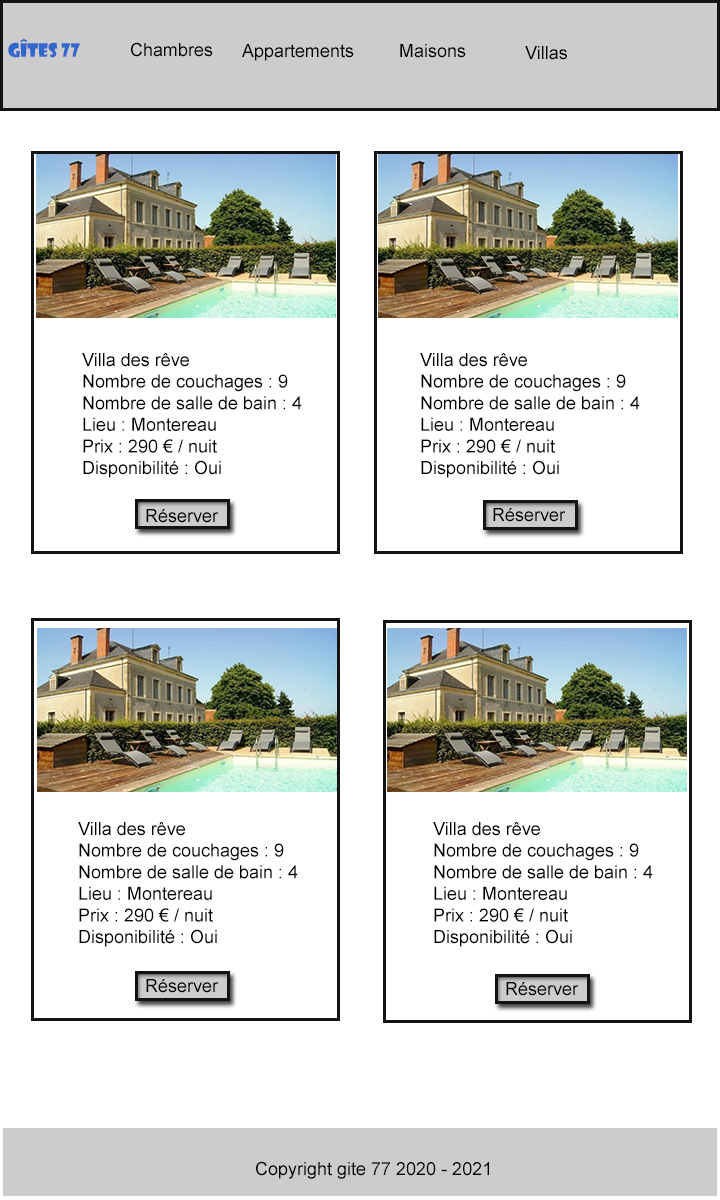
<style>
.page{position:relative;width:720px;height:1200px;background:#ffffff}
.page>*{position:absolute;margin:0}
.t1{font:18px "ShowcardGothic-Reg";color:#3366cc}
.t2{font:18px "ArialMT";color:#000000}
</style>
<div class="page">
<p class="t1" style="left:8px;top:38px;width:72px;height:20px">Gîtes 77</p>
<p class="t2" style="left:131px;top:42px;width:82px;height:15px">Chambres</p>
<p class="t2" style="left:242px;top:44px;width:112px;height:17px">Appartements</p>
<p class="t2" style="left:400px;top:44px;width:66px;height:14px">Maisons</p>
<p class="t2" style="left:525px;top:46px;width:42px;height:14px">Villas</p>
<p class="t2" style="left:82px;top:353px;width:220px;height:125px">Villa des rêve<br>Nombre de couchages : 9<br>Nombre de salle de bain : 4<br>Lieu : Montereau<br>Prix : 290 € / nuit<br>Disponibilité : Oui</p>
<p class="t2" style="left:420px;top:353px;width:220px;height:125px">Villa des rêve<br>Nombre de couchages : 9<br>Nombre de salle de bain : 4<br>Lieu : Montereau<br>Prix : 290 € / nuit<br>Disponibilité : Oui</p>
<p class="t2" style="left:146px;top:509px;width:73px;height:14px">Réserver</p>
<p class="t2" style="left:493px;top:508px;width:73px;height:14px">Réserver</p>
<p class="t2" style="left:78px;top:822px;width:220px;height:125px">Villa des rêve<br>Nombre de couchages : 9<br>Nombre de salle de bain : 4<br>Lieu : Montereau<br>Prix : 290 € / nuit<br>Disponibilité : Oui</p>
<p class="t2" style="left:433px;top:822px;width:220px;height:125px">Villa des rêve<br>Nombre de couchages : 9<br>Nombre de salle de bain : 4<br>Lieu : Montereau<br>Prix : 290 € / nuit<br>Disponibilité : Oui</p>
<p class="t2" style="left:146px;top:979px;width:73px;height:14px">Réserver</p>
<p class="t2" style="left:506px;top:982px;width:73px;height:14px">Réserver</p>
<p class="t2" style="left:256px;top:1161px;width:233px;height:18px">Copyright gite 77 2020 - 2021</p>
</div>
